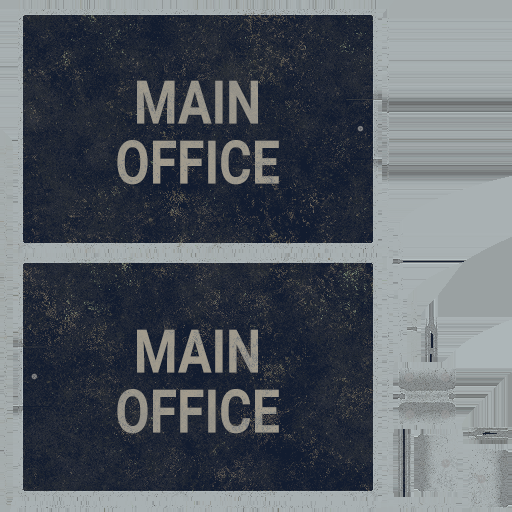
<style>
.page{position:relative;width:512px;height:512px}
.page>*{position:absolute;margin:0}
.t1{font:60px "Asimov";color:#9a968c;text-transform:uppercase;scale:0.83 1}
.t2{font:60px "Asimov";color:#9b978c;text-transform:uppercase;scale:0.83 1}
</style>
<div class="page">
<p class="t1" style="left:117px;top:80px;width:162px;height:105px;text-align:center">Main<br>Office</p>
<p class="t2" style="left:117px;top:329px;width:162px;height:105px;text-align:center">Main<br>Office</p>
</div>
